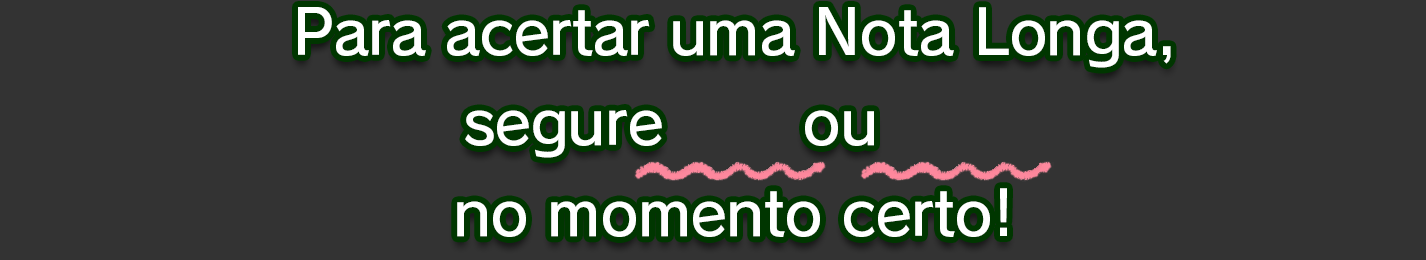
<style>
.page{position:relative;width:1426px;height:260px;background:#333333}
.page>*{position:absolute;margin:0}
.t1{font:61.3px/90.7px "RodinPro-DB";letter-spacing:-0.022em;color:#ffffff}
.t2{font:69.3px/90.7px "NewRodinPro-DB";letter-spacing:-0.022em;color:#ffffff}
</style>
<div class="page">
<p class="t1" style="left:298px;top:7px;width:873px;height:230px;text-align:center">Para acertar uma Nota Longa,<br>segure <span class="t2">ZL</span> ou <span class="t2">ZR<br></span>no momento certo!</p>
</div>
